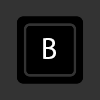
<style>
.page{position:relative;width:100px;height:100px;background:#333333}
.page>*{position:absolute;margin:0}
.t1{font:30px "MyriadPro-Regular";color:#ffffff}
</style>
<div class="page">
<p class="t1" style="left:43px;top:38px;width:13px;height:21px">B</p>
</div>
